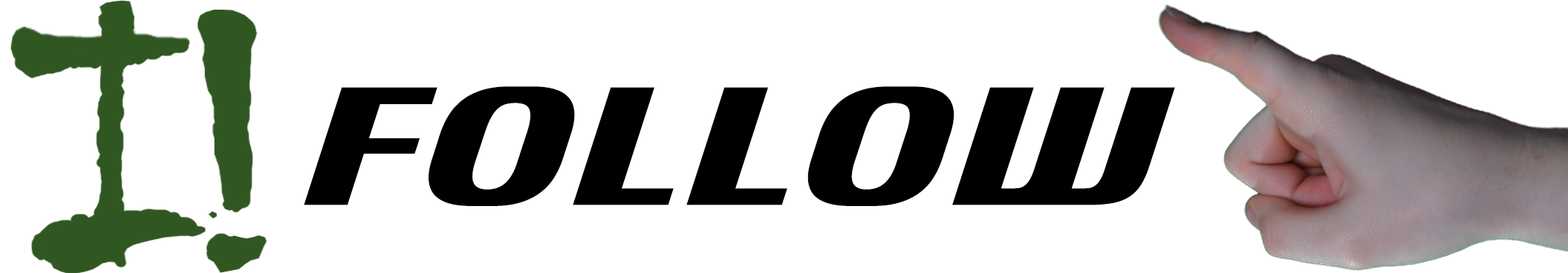
<style>
.page{position:relative;width:1568px;height:273px;background:#ffffff}
.page>*{position:absolute;margin:0}
.t1{font:265.2px "Motorwerk";color:#000000}
</style>
<div class="page">
<p class="t1" style="left:304px;top:86px;width:871px;height:120px">Follow</p>
</div>
